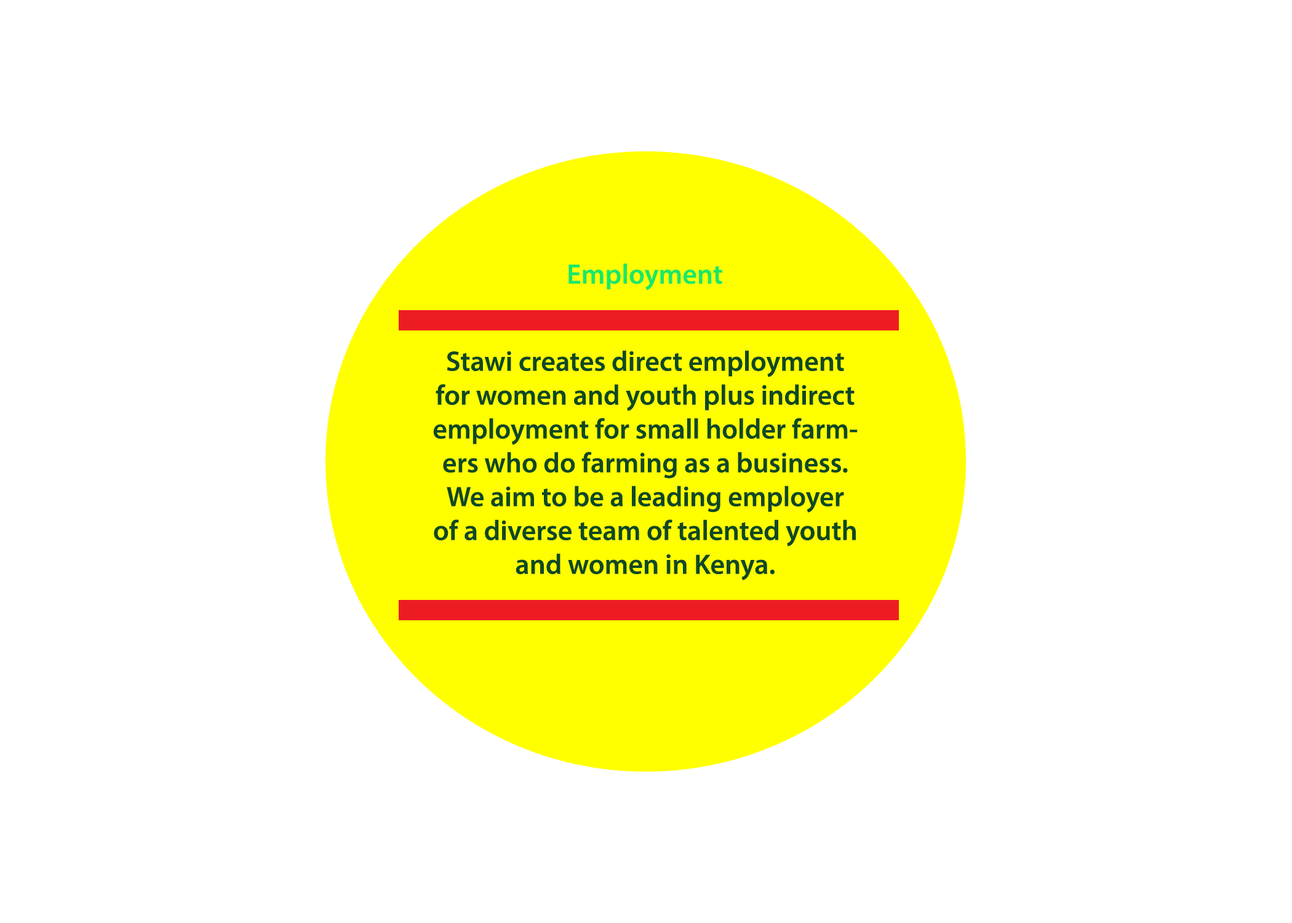
<style>
.page{position:relative;width:1292px;height:923px;background:#ffffff}
.page>*{position:absolute;margin:0}
.t1{font:28.2px "MyriadPro-Semibold";color:#19e867}
.t2{font:28.2px "MyriadPro-Semibold";color:#0f4825}
</style>
<div class="page">
<p class="t1" style="left:569px;top:263px;width:153px;height:27px">Employment</p>
<p class="t2" style="left:433px;top:350px;width:425px;height:230px;text-align:center">Stawi creates direct employment for women and youth plus indirect employment for small holder farmers who do farming as a business. We aim to be a leading employer of a diverse team of talented youth and women in Kenya.</p>
</div>
